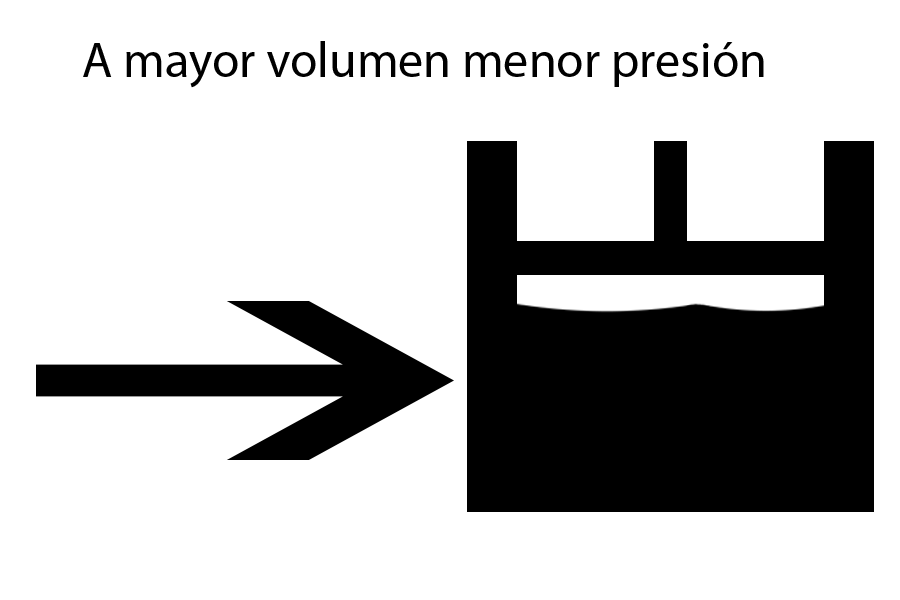
<style>
.page{position:relative;width:900px;height:600px;background:#ffffff}
.page>*{position:absolute;margin:0}
.t1{font:12px "MyriadPro-Regular";color:#000000}
</style>
<div class="page">
<p class="t1" style="left:83px;top:41px;width:681px;height:47px">A mayor volumen menor presión</p>
</div>
